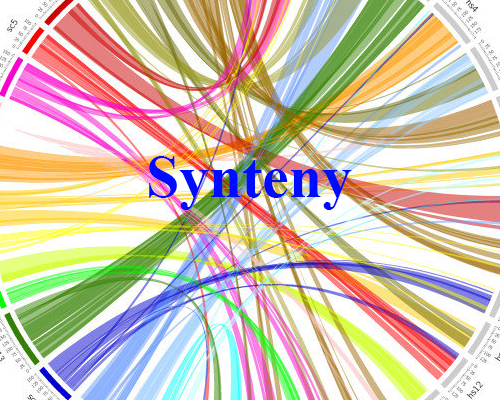
<style>
.page{position:relative;width:500px;height:400px}
.page>*{position:absolute;margin:0}
.t1{font:60px "TimesNewRomanPS-BoldMT";color:#000cff}
</style>
<div class="page">
<p class="t1" style="left:149px;top:156px;width:203px;height:54px">Synteny</p>
</div>
